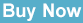
<style>
.page{position:relative;width:83px;height:23px;background:#57aeca}
.page>*{position:absolute;margin:0}
.t1{font:18.6px "Arial-BoldMT";letter-spacing:-0.005em;color:#ffffff}
</style>
<div class="page">
<p class="t1" style="left:3px;top:3px;width:79px;height:18px">Buy Now</p>
</div>
